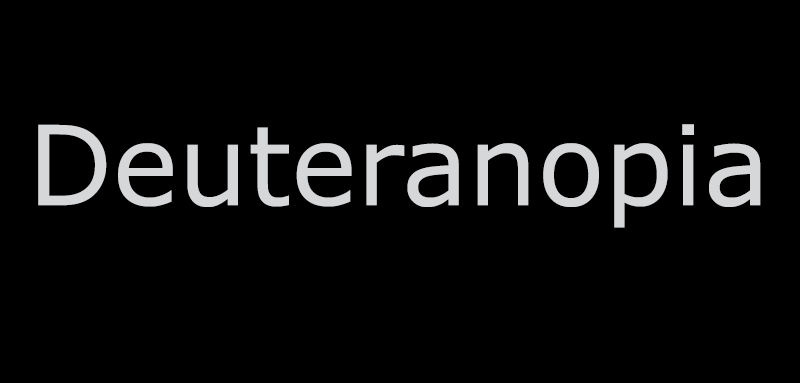
<style>
.page{position:relative;width:800px;height:383px;background:#000000}
.page>*{position:absolute;margin:0}
.t1{font:110.1px "Verdana";color:#d5d7d8}
</style>
<div class="page">
<p class="t1" style="left:38px;top:124px;width:723px;height:104px">Deuteranopia</p>
</div>
